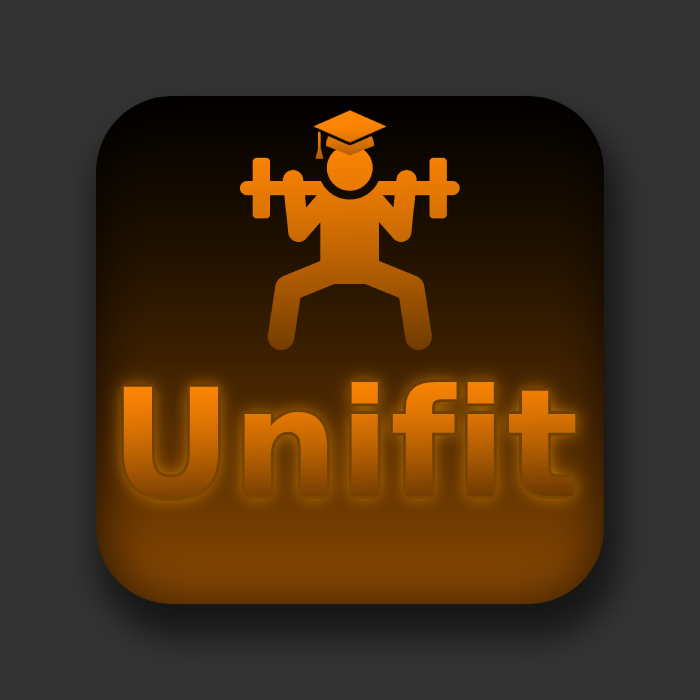
<style>
.page{position:relative;width:700px;height:700px;background:#333333}
.page>*{position:absolute;margin:0}
.t1{font:150px "DejaVuSans-Bold"}
</style>
<div class="page">
<p class="t1" style="left:123px;top:382px;width:453px;height:117px">Unifit</p>
</div>
